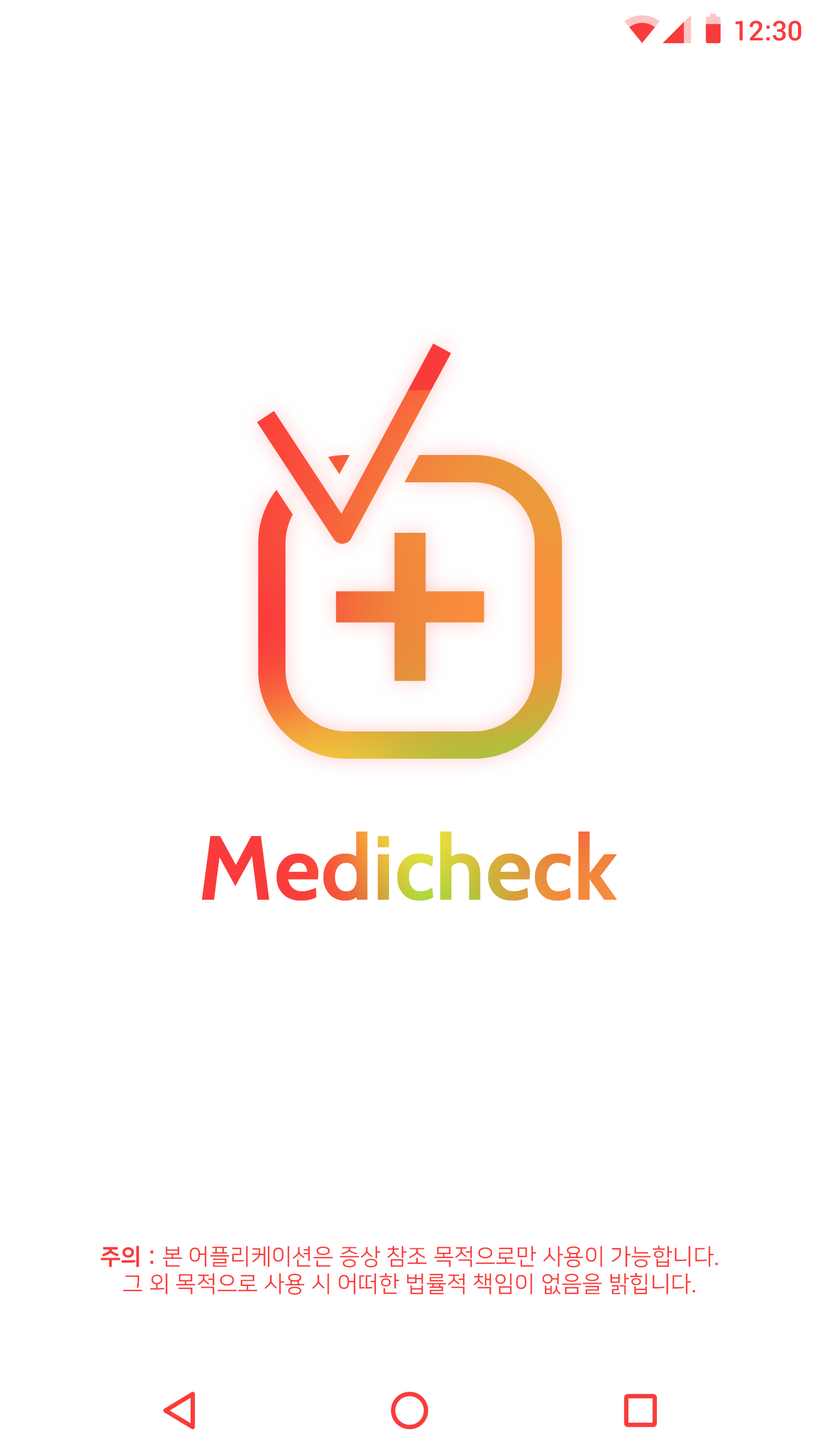
<style>
.page{position:relative;width:819px;height:1456px;background:#ffffff}
.page>*{position:absolute;margin:0}
.t1{font:27.3px "Roboto-Medium";color:#fa3b3b}
.t2{font:91px "Cabin-Bold"}
.t3{font:22.7px "NanumSquareR";color:#fa3b3b}
.t4{font:22.7px "NanumSquareEB";color:#fa3b3b}
</style>
<div class="page">
<p class="t1" style="left:735px;top:20px;width:66px;height:21px">12:30</p>
<p class="t2" style="left:202px;top:832px;width:415px;height:69px">Medicheck</p>
<p class="t3" style="left:101px;top:1246px;width:617px;height:49px;text-align:center"><span class="t4">주의 : </span>본 어플리케이션은 증상 참조 목적으로만 사용이 가능합니다.<br>그 외 목적으로 사용 시 어떠한 법률적 책임이 없음을 밝힙니다.</p>
</div>
